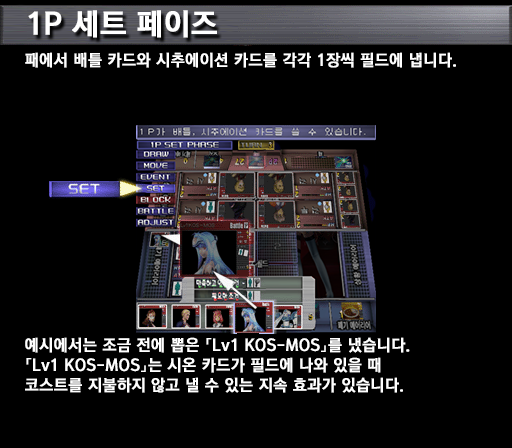
<style>
.page{position:relative;width:512px;height:448px;background:#000000}
.page>*{position:absolute;margin:0}
.t1{font:30px "KoreanGD15-R";color:#ffffff;font-weight:bold}
.t2{font:16px "KoreanGD15-R";color:#ffffff;font-weight:bold}
.t3{font:16px/20px "KoreanGD15-R";color:#ffffff;font-weight:bold}
</style>
<div class="page">
<p class="t1" style="left:28px;top:10px;width:189px;height:28px">1P 세트 페이즈</p>
<p class="t2" style="left:25px;top:52px;width:431px;height:16px">패에서 배틀 카드와 시추에이션 카드를 각각 1장씩 필드에 냅니다.</p>
<p class="t3" style="left:25px;top:337px;width:385px;height:56px">예시에서는 조금 전에 뽑은 「Lv1 KOS-MOS」를 냈습니다.<br>「Lv1 KOS-MOS」는 시온 카드가 필드에 나와 있을 때<br>코스트를 지불하지 않고 낼 수 있는 지속 효과가 있습니다.</p>
</div>
